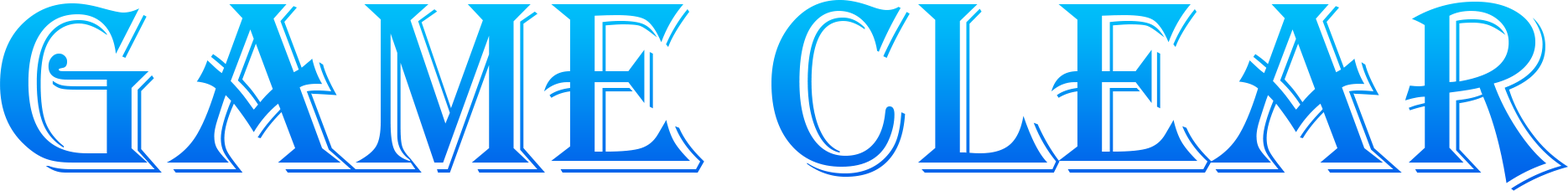
<style>
.page{position:relative;width:1568px;height:191px;background:#ffffff}
.page>*{position:absolute;margin:0}
.t1{font:253.6px "Algerian"}
</style>
<div class="page">
<p class="t1" style="left:0px;top:0px;width:1568px;height:191px">Game Clear</p>
</div>
